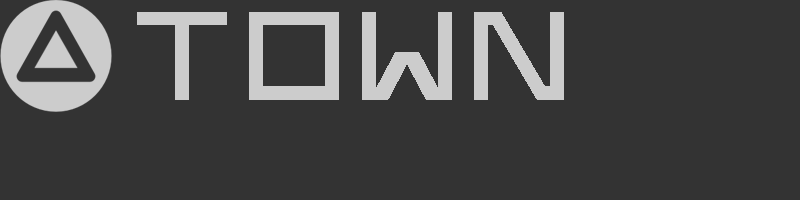
<style>
.page{position:relative;width:800px;height:200px;background:#333333}
.page>*{position:absolute;margin:0}
.t1{font:101px "7THDR2020Regular";letter-spacing:0.08em;color:#cccccc}
</style>
<div class="page">
<p class="t1" style="left:137px;top:12px;width:427px;height:88px">TOWN</p>
</div>
